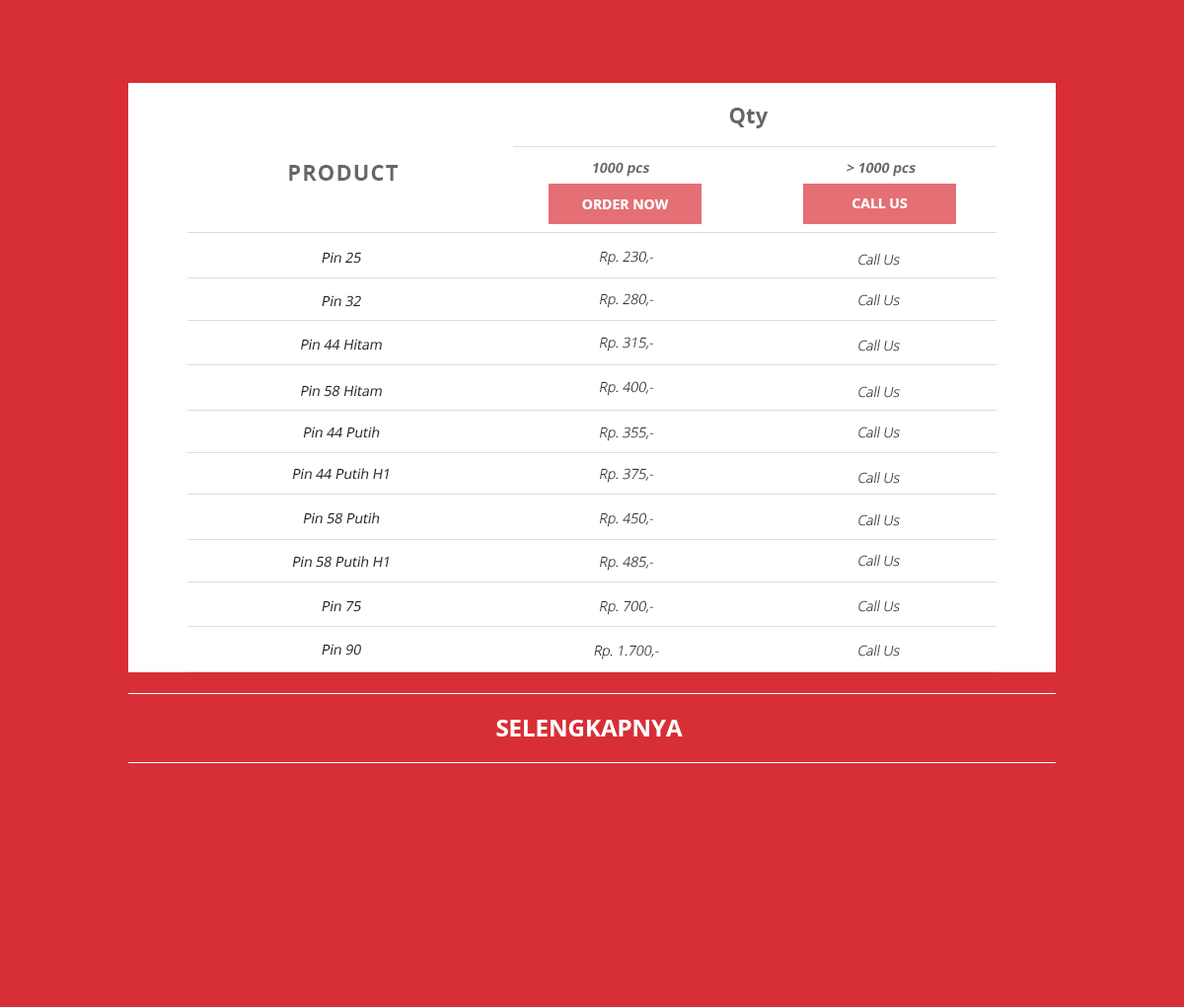
<style>
.page{position:relative;width:1184px;height:1007px;background:#d82f36}
.page>*{position:absolute;margin:0}
.t1{font:21.7px "OpenSans-Bold";color:#666666}
.t2{font:13.8px "OpenSans-Bold";color:#666666;font-style:italic}
.t3{font:21.7px "OpenSans-Bold";letter-spacing:0.05em;color:#666666}
.t4{font:13.8px "OpenSans-Bold";color:#ffffff}
.t5{font:13.8px "OpenSans";color:#222222;font-style:italic}
.t6{font:13.8px "OpenSans-Light";font-style:italic}
.t7{font:13.8px "OpenSans-Light";color:#222222;font-style:italic}
.t8{font:23.7px "OpenSans-Bold";color:#ffffff}
</style>
<div class="page">
<p class="t1" style="left:729px;top:108px;width:40px;height:20px">Qty</p>
<p class="t2" style="left:593px;top:162px;width:57px;height:15px">1000 pcs</p>
<p class="t2" style="left:847px;top:162px;width:69px;height:15px">&gt; 1000 pcs</p>
<p class="t3" style="left:289px;top:165px;width:109px;height:16px">PRODUCT</p>
<p class="t4" style="left:582px;top:199px;width:87px;height:10px">ORDER NOW</p>
<p class="t4" style="left:853px;top:198px;width:55px;height:10px">CALL US</p>
<p class="t5" style="left:322px;top:252px;width:39px;height:12px">Pin 25</p>
<p class="t6" style="left:600px;top:251px;width:54px;height:15px">Rp. 230,-</p>
<p class="t6" style="left:859px;top:254px;width:41px;height:12px">Call Us</p>
<p class="t6" style="left:600px;top:293px;width:54px;height:15px">Rp. 280,-</p>
<p class="t5" style="left:322px;top:295px;width:39px;height:12px">Pin 32</p>
<p class="t6" style="left:859px;top:294px;width:41px;height:12px">Call Us</p>
<p class="t5" style="left:301px;top:339px;width:81px;height:11px">Pin 44 Hitam</p>
<p class="t6" style="left:600px;top:337px;width:54px;height:14px">Rp. 315,-</p>
<p class="t6" style="left:859px;top:340px;width:41px;height:11px">Call Us</p>
<p class="t5" style="left:301px;top:385px;width:81px;height:12px">Pin 58 Hitam</p>
<p class="t6" style="left:600px;top:381px;width:54px;height:15px">Rp. 400,-</p>
<p class="t6" style="left:859px;top:386px;width:41px;height:12px">Call Us</p>
<p class="t5" style="left:303px;top:426px;width:77px;height:12px">Pin 44 Putih</p>
<p class="t6" style="left:600px;top:426px;width:54px;height:15px">Rp. 355,-</p>
<p class="t6" style="left:859px;top:426px;width:41px;height:12px">Call Us</p>
<p class="t5" style="left:292px;top:468px;width:97px;height:12px">Pin 44 Putih H1</p>
<p class="t6" style="left:600px;top:468px;width:54px;height:15px">Rp. 375,-</p>
<p class="t6" style="left:859px;top:472px;width:41px;height:12px">Call Us</p>
<p class="t5" style="left:303px;top:512px;width:77px;height:12px">Pin 58 Putih</p>
<p class="t6" style="left:600px;top:512px;width:54px;height:15px">Rp. 450,-</p>
<p class="t6" style="left:859px;top:514px;width:41px;height:12px">Call Us</p>
<p class="t5" style="left:292px;top:556px;width:97px;height:12px">Pin 58 Putih H1</p>
<p class="t6" style="left:600px;top:556px;width:54px;height:14px">Rp. 485,-</p>
<p class="t6" style="left:859px;top:555px;width:41px;height:12px">Call Us</p>
<p class="t5" style="left:322px;top:600px;width:39px;height:12px">Pin 75</p>
<p class="t6" style="left:600px;top:600px;width:54px;height:15px">Rp. 700,-</p>
<p class="t6" style="left:859px;top:600px;width:41px;height:12px">Call Us</p>
<p class="t5" style="left:322px;top:644px;width:39px;height:11px">Pin 90</p>
<p class="t7" style="left:594px;top:645px;width:65px;height:14px">Rp. 1.700,-</p>
<p class="t6" style="left:859px;top:645px;width:41px;height:11px">Call Us</p>
<p class="t8" style="left:496px;top:720px;width:187px;height:16px">SELENGKAPNYA</p>
</div>
